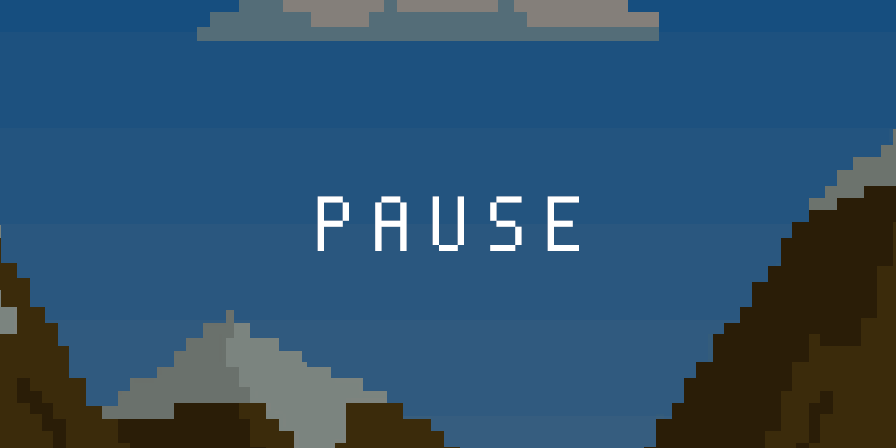
<style>
.page{position:relative;width:896px;height:448px;background:#23547f}
.page>*{position:absolute;margin:0}
.t1{font:97px "Nine-By-Five-NBP";letter-spacing:0.2em;color:#ffffff;scale:1.03 1}
</style>
<div class="page">
<p class="t1" style="left:317px;top:196px;width:262px;height:55px">PAUSE</p>
</div>
